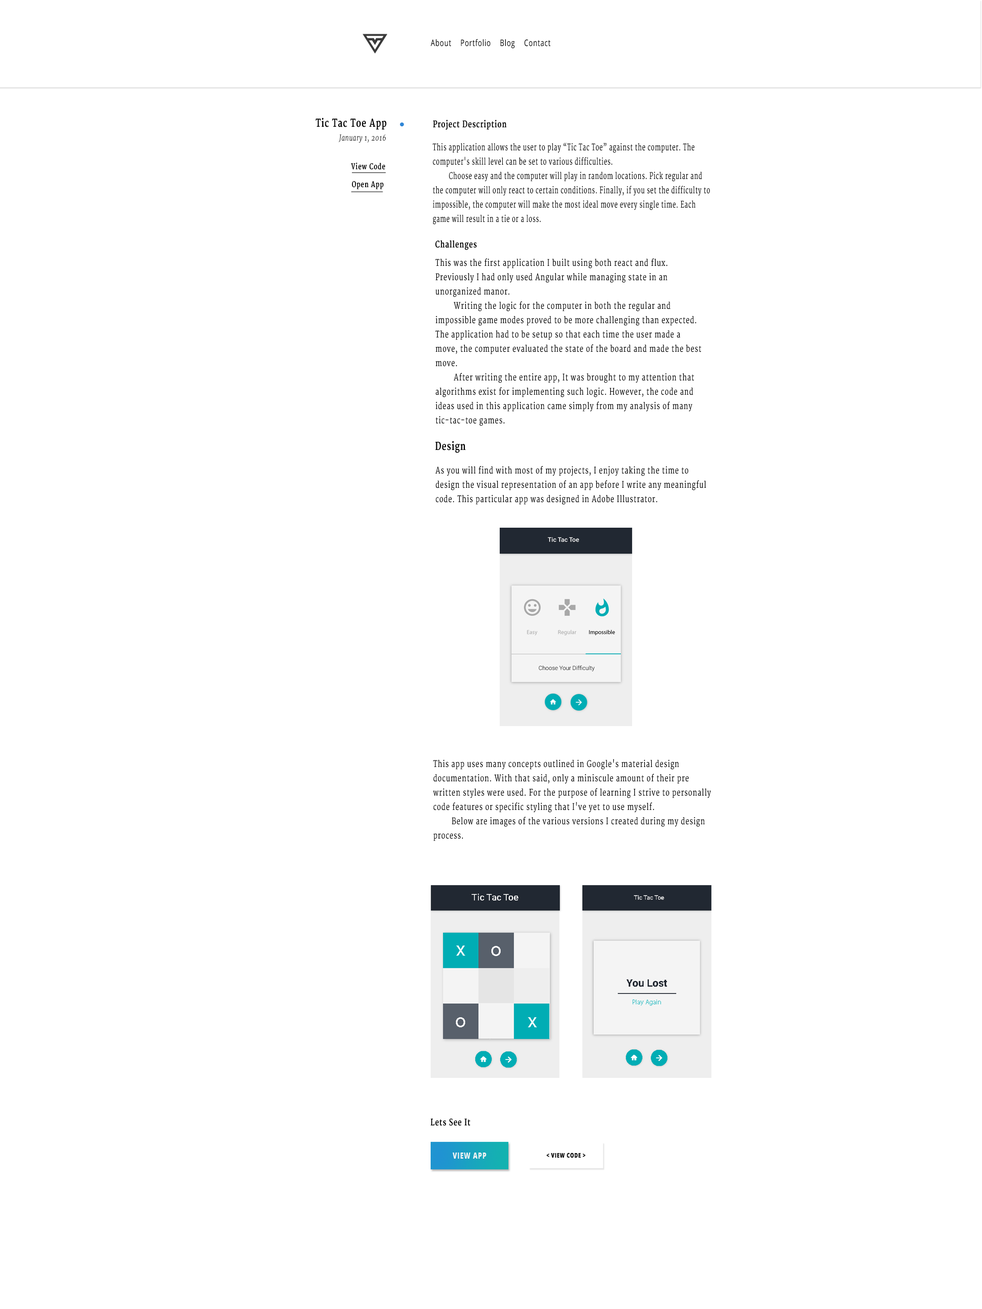
<style>
.page{position:relative;width:982px;height:1309px;background:#ffffff}
.page>*{position:absolute;margin:0}
.t1{font:9px "OpenSans";letter-spacing:0.075em;color:#000000;scale:0.73 1}
.t2{font:10.7px "Merriweather-Bold";letter-spacing:0.075em;color:#000000;scale:0.73 1}
.t3{font:9px "Merriweather-Bold";letter-spacing:0.075em;color:#000000;scale:0.73 1}
.t4{font:7.9px "Merriweather-LightItalic";letter-spacing:0.075em;color:#000000;scale:0.73 1}
.t5{font:9px/14.3px "Merriweather";letter-spacing:0.075em;color:#000000;scale:0.64 1}
.t6{font:7.9px "Merriweather-Bold";letter-spacing:0.075em;color:#000000;scale:0.73 1}
.t7{font:9px/14.3px "Merriweather";letter-spacing:0.075em;color:#000000;scale:0.73 1}
.t8{font:8.6px "OpenSans-Extrabold";letter-spacing:0.075em;color:#f3f3f3;scale:0.73 1}
.t9{font:6.6px "OpenSans-Extrabold";letter-spacing:0.075em;color:#000000;scale:0.73 1}
</style>
<div class="page">
<p class="t1" style="left:431px;top:39px;width:119px;height:10px">About Portfolio Blog Contact</p>
<p class="t2" style="left:316px;top:118px;width:71px;height:12px">Tic Tac Toe App</p>
<p class="t3" style="left:433px;top:120px;width:73px;height:10px">Project Description</p>
<p class="t4" style="left:339px;top:134px;width:47px;height:9px">January 1, 2016</p>
<p class="t5" style="left:433px;top:143px;width:277px;height:81px">This application allows the user to play “Tic Tac Toe” against the computer. The computer's skill level can be set to various difficulties.<br> Choose easy and the computer will play in random locations. Pick regular and the computer will only react to certain conditions. Finally, if you set the difficulty to impossible, the computer will make the most ideal move every single time. Each game will result in a tie or a loss.</p>
<p class="t6" style="left:351px;top:163px;width:34px;height:7px">View Code</p>
<p class="t6" style="left:352px;top:181px;width:32px;height:8px">Open App</p>
<p class="t3" style="left:435px;top:240px;width:42px;height:10px">Challenges</p>
<p class="t7" style="left:435px;top:258px;width:266px;height:168px">This was the first application I built using both react and flux. Previously I had only used Angular while managing state in an unorganized manor.<br> Writing the logic for the computer in both the regular and impossible game modes proved to be more challenging than expected. The application had to be setup so that each time the user made a move, the computer evaluated the state of the board and made the best move.<br> After writing the entire app, It was brought to my attention that algorithms exist for implementing such logic. However, the code and ideas used in this application came simply from my analysis of many tic-tac-toe games.</p>
<p class="t2" style="left:435px;top:441px;width:30px;height:12px">Design</p>
<p class="t7" style="left:435px;top:466px;width:271px;height:39px">As you will find with most of my projects, I enjoy taking the time to design the visual representation of an app before I write any meaningful code. This particular app was designed in Adobe Illustrator.</p>
<p class="t7" style="left:433px;top:759px;width:278px;height:82px">This app uses many concepts outlined in Google's material design documentation. With that said, only a miniscule amount of their pre written styles were used. For the purpose of learning I strive to personally code features or specific styling that I've yet to use myself.<br> Below are images of the various versions I created during my design process.</p>
<p class="t3" style="left:431px;top:1118px;width:39px;height:8px">Lets See It</p>
<p class="t8" style="left:453px;top:1153px;width:33px;height:6px">VIEW APP</p>
<p class="t9" style="left:546px;top:1153px;width:40px;height:5px">&lt; VIEW CODE &gt;</p>
</div>
